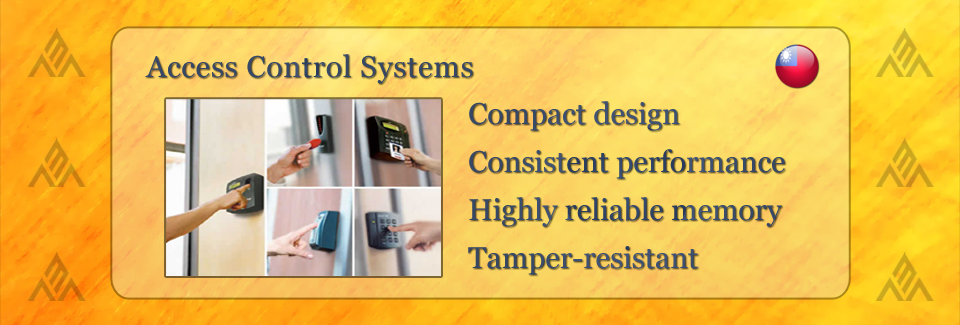
<style>
.page{position:relative;width:960px;height:325px}
.page>*{position:absolute;margin:0}
.t1{font:30px "Georgia";letter-spacing:0.025em;color:#364866}
.t2{font:30px/48px "Georgia";color:#384a6b}
</style>
<div class="page">
<p class="t1" style="left:145px;top:54px;width:328px;height:30px">Access Control Systems</p>
<p class="t2" style="left:468px;top:101px;width:317px;height:174px">Compact design<br>Consistent performance<br>Highly reliable memory<br>Tamper-resistant</p>
</div>
